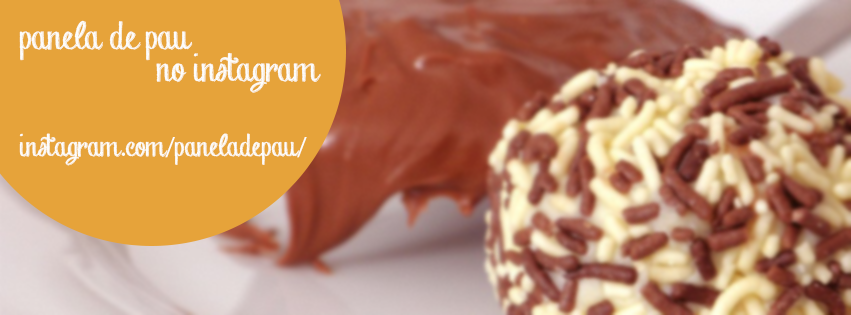
<style>
.page{position:relative;width:851px;height:315px;background:#e6a33a}
.page>*{position:absolute;margin:0}
.t1{font:35px/32px "Chalk-hand-lettering-shaded_demo";color:#fdfdfc}
.t2{font:28px "Chalk-hand-lettering-shaded_demo";color:#fdfdfc}
.t3{font:28px "MyriadPro-Regular";color:#fdfdfc}
</style>
<div class="page">
<p class="t1" style="left:19px;top:20px;width:302px;height:73px;text-align:right">panela de pau         no instagram</p>
<p class="t2" style="left:19px;top:133px;width:288px;height:33px">instagram<span class="t3">.</span>com<span class="t3">/</span>paneladepau<span class="t3">/</span></p>
</div>
